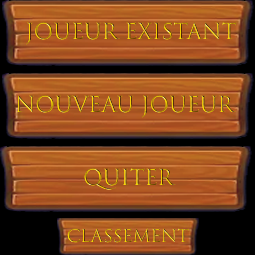
<style>
.page{position:relative;width:255px;height:255px}
.page>*{position:absolute;margin:0}
.t1{font:21.2px "TrajanColor-Concept"}
.t2{font:17.1px "TrajanColor-Concept"}
</style>
<div class="page">
<p class="t1" style="left:26px;top:22px;width:211px;height:23px">JouEUR Existant</p>
<p class="t1" style="left:16px;top:95px;width:220px;height:23px">NOUVEAU JOUEUR</p>
<p class="t1" style="left:84px;top:168px;width:92px;height:22px">QUITER</p>
<p class="t2" style="left:67px;top:228px;width:122px;height:15px">Classement</p>
</div>
